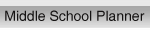
<style>
.page{position:relative;width:150px;height:30px}
.page>*{position:absolute;margin:0}
.t1{font:24px "Helvetica";color:#151313}
</style>
<div class="page">
<p class="t1" style="left:5px;top:10px;width:140px;height:11px">Middle School Planner</p>
<p class="t1" style="left:5px;top:10px;width:140px;height:11px">Middle School Planner</p>
</div>
